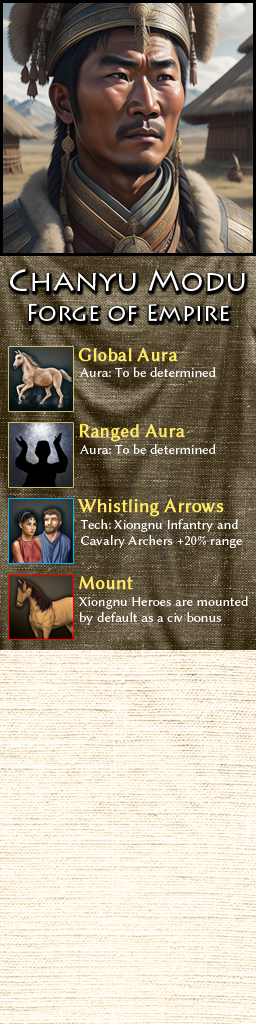
<style>
.page{position:relative;width:256px;height:1024px}
.page>*{position:absolute;margin:0}
.t1{font:24px/30px "LithosPro-Regular";color:#ffffff}
.t2{font:30px/30px "LithosPro-Regular";color:#ffffff}
.t3{font:19px "LinBiolinumO";color:#ffe963;font-weight:bold}
.t4{font:14px "LinBiolinumO";color:#ffffff}
</style>
<div class="page">
<p class="t1" style="left:10px;top:269px;width:235px;height:52px;text-align:center"><span class="t2">Chanyu Modu<br></span>Forge of Empire</p>
<p class="t3" style="left:78px;top:348px;width:100px;height:14px">Global Aura</p>
<p class="t4" style="left:80px;top:367px;width:136px;height:10px">Aura: To be determined</p>
<p class="t3" style="left:79px;top:424px;width:106px;height:18px">Ranged Aura</p>
<p class="t4" style="left:80px;top:444px;width:136px;height:10px">Aura: To be determined</p>
<p class="t3" style="left:78px;top:499px;width:146px;height:18px">Whistling Arrows</p>
<p class="t4" style="left:80px;top:519px;width:162px;height:29px">Tech: Xiongnu Infantry and <br>Cavalry Archers +20% range</p>
<p class="t3" style="left:79px;top:576px;width:54px;height:14px">Mount</p>
<p class="t4" style="left:79px;top:596px;width:169px;height:29px">Xiongnu Heroes are mounted<br>by default as a civ bonus</p>
</div>
